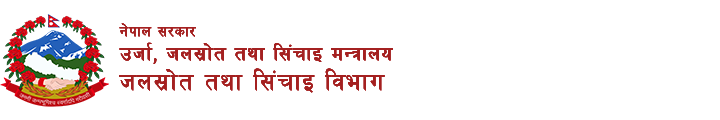
<style>
.page{position:relative;width:720px;height:120px;background:#ffffff}
.page>*{position:absolute;margin:0}
.t1{font:24px/24px "Preeti";color:#a42020;font-weight:bold}
.t2{font:18px/24px "Preeti";color:#a42020;font-weight:bold}
.t3{font:30px/30px "Preeti";color:#a42020;font-weight:bold}
</style>
<div class="page">
<p class="t1" style="left:119px;top:23px;width:274px;height:70px"><span class="t2">g]kfn ;/sf/<br></span>phf{, hn;|f]t tyf l;+rfO dGqfno<br><span class="t3">hn;|f]t tyf l;+rfO ljefu</span></p>
<p class="t1" style="left:119px;top:23px;width:274px;height:70px"><span class="t2">g]kfn ;/sf/<br></span>phf{, hn;|f]t tyf l;+rfO dGqfno<br><span class="t3">hn;|f]t tyf l;+rfO ljefu</span></p>
<p class="t1" style="left:119px;top:23px;width:274px;height:70px"><span class="t2">g]kfn ;/sf/<br></span>phf{, hn;|f]t tyf l;+rfO dGqfno<br><span class="t3">hn;|f]t tyf l;+rfO ljefu</span></p>
<p class="t1" style="left:119px;top:23px;width:274px;height:70px"><span class="t2">g]kfn ;/sf/<br></span>phf{, hn;|f]t tyf l;+rfO dGqfno<br><span class="t3">hn;|f]t tyf l;+rfO ljefu</span></p>
</div>
